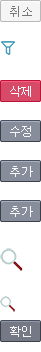
<style>
.page{position:relative;width:41px;height:352px;background:#ffffff}
.page>*{position:absolute;margin:0}
.t1{font:12px "Dotum";color:#777777}
.t2{font:12px "Dotum";color:#ffffff}
.t3{font:12px "Dotum";color:#f7f7f7}
</style>
<div class="page">
<p class="t1" style="left:10px;top:6px;width:22px;height:11px">취소</p>
<p class="t2" style="left:10px;top:86px;width:21px;height:11px">삭제</p>
<p class="t3" style="left:10px;top:126px;width:21px;height:11px">수정</p>
<p class="t3" style="left:10px;top:166px;width:23px;height:11px">추가</p>
<p class="t3" style="left:10px;top:206px;width:23px;height:11px">추가</p>
<p class="t3" style="left:10px;top:326px;width:21px;height:11px">확인</p>
</div>
